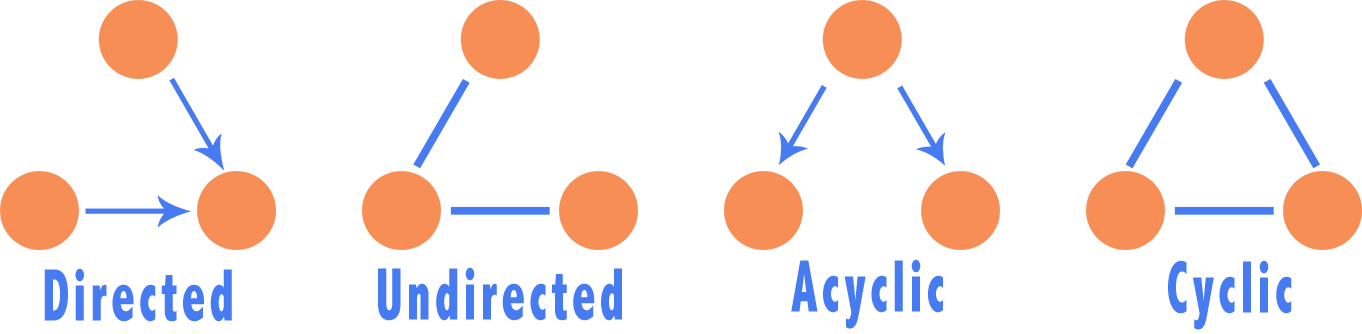
<style>
.page{position:relative;width:1362px;height:334px;background:#ffffff}
.page>*{position:absolute;margin:0}
.t1{font:75px "AbadiMT-CondensedExtraBold";letter-spacing:0.075em;color:#477bf2;scale:0.68 1}
</style>
<div class="page">
<p class="t1" style="left:44px;top:268px;width:188px;height:54px">Directed</p>
<p class="t1" style="left:378px;top:267px;width:244px;height:54px">Undirected</p>
<p class="t1" style="left:791px;top:259px;width:152px;height:70px">Acyclic</p>
<p class="t1" style="left:1168px;top:260px;width:124px;height:70px">Cyclic</p>
</div>
